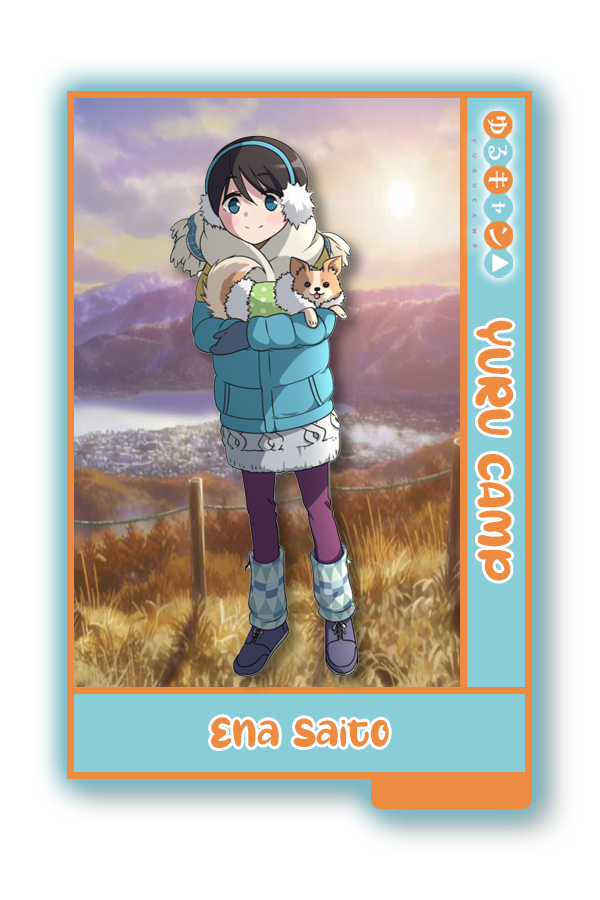
<style>
.page{position:relative;width:600px;height:900px;background:#ffffff}
.page>*{position:absolute;margin:0}
.t1{font:48.8px "OhMyBaby";color:#ed8c41}
.t2{font:41.1px "OhMyBaby";color:#ed8c41;scale:0.94 1}
</style>
<div class="page">
<p class="t1" style="left:475px;top:320px;width:39px;height:261px;rotate:90deg">YURU CAMP</p>
<p class="t2" style="left:211px;top:717px;width:178px;height:31px">Ena Saito</p>
</div>
